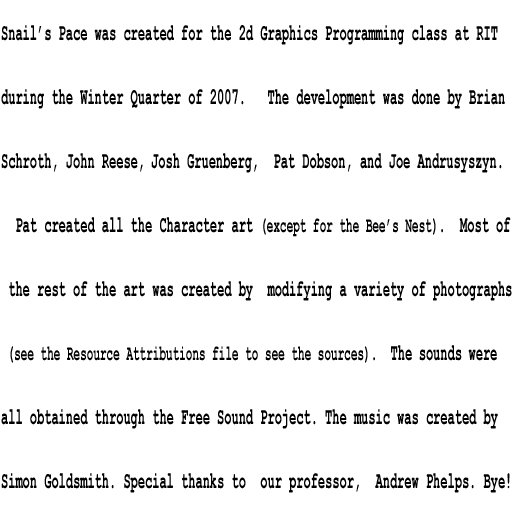
<style>
.page{position:relative;width:512px;height:512px;background:#ffffff}
.page>*{position:absolute;margin:0}
.t1{font:24.1px/64px "CourierNewPS-BoldMT";color:#000000;scale:0.5 1}
.t2{font:22.1px/64px "CourierNewPS-BoldMT";color:#000000;scale:0.5 1}
</style>
<div class="page">
<p class="t1" style="left:1px;top:25px;width:511px;height:468px">Snail’s Pace was created for the 2d Graphics Programming class at RIT  <br>during the Winter Quarter of 2007.   The development was done by Brian <br>Schroth, John Reese, Josh Gruenberg,  Pat Dobson, and Joe Andrusyszyn. <br>  Pat created all the Character art <span class="t2">(except for the Bee’s Nest)</span>.  Most of<br> the rest of the art was created by  modifying a variety of photographs<br><span class="t2"> (see the Resource Attributions file to see the sources).  </span>The sounds were <br>all obtained through the Free Sound Project. The music was created by <br>Simon Goldsmith. Special thanks to  our professor,  Andrew Phelps. Bye!</p>
</div>
